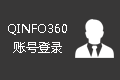
<style>
.page{position:relative;width:120px;height:80px;background:#383737}
.page>*{position:absolute;margin:0}
.t1{font:12px "MicrosoftYaHei";color:#ffffff}
</style>
<div class="page">
<p class="t1" style="left:8px;top:24px;width:59px;height:11px">QINFO360</p>
<p class="t1" style="left:13px;top:42px;width:49px;height:11px">账号登录</p>
</div>
